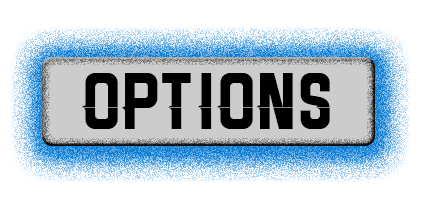
<style>
.page{position:relative;width:432px;height:212px;background:#ffffff}
.page>*{position:absolute;margin:0}
.t1{font:72px "MelmaLine";color:#000000}
</style>
<div class="page">
<p class="t1" style="left:82px;top:73px;width:248px;height:56px">Options</p>
</div>
